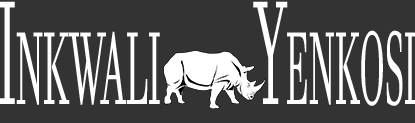
<style>
.page{position:relative;width:415px;height:123px;background:#333333}
.page>*{position:absolute;margin:0}
.t1{font:144px "JavaneseText";color:#ffffff;font-variant:small-caps;scale:0.36 1}
.t2{font:144px "JavaneseText";color:#ffffff;font-variant:small-caps;scale:0.34 1}
</style>
<div class="page">
<p class="t1" style="left:0px;top:1px;width:160px;height:104px">Inkwali</p>
<p class="t2" style="left:253px;top:1px;width:163px;height:105px">Yenkosi</p>
</div>
